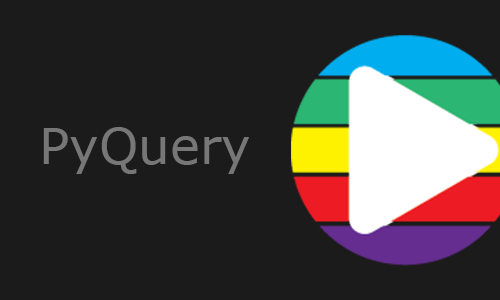
<style>
.page{position:relative;width:500px;height:300px;background:#1b1b1b}
.page>*{position:absolute;margin:0}
.t1{font:50px "Verdana";color:#777777}
</style>
<div class="page">
<p class="t1" style="left:43px;top:127px;width:206px;height:47px">PyQuery</p>
</div>
